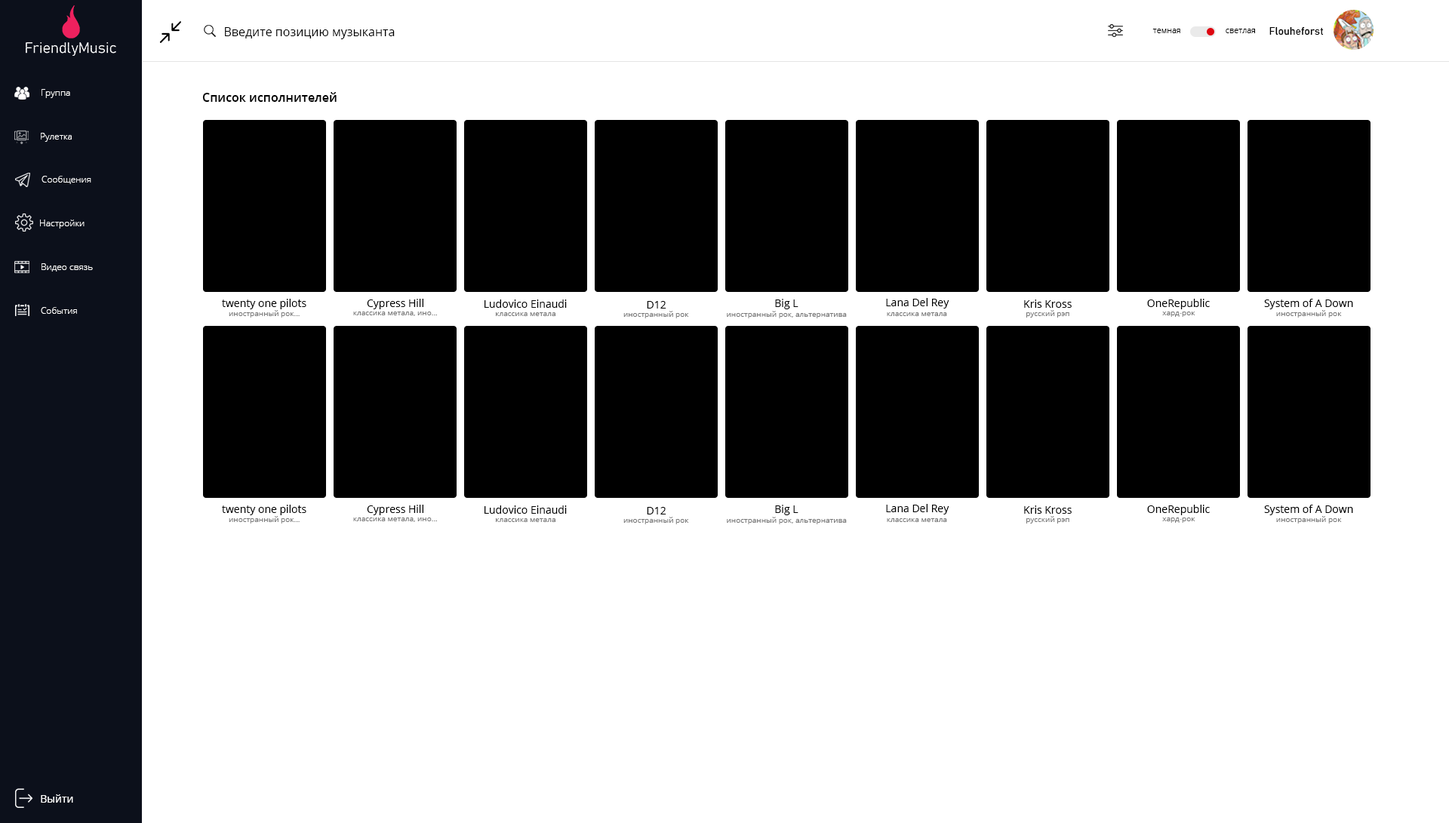
<style>
.page{position:relative;width:1449px;height:823px;background:#ffffff}
.page>*{position:absolute;margin:0}
.t1{font:12.1px "OpenSans";color:#000000}
.t2{font:8.3px "OpenSans-Light";color:#000000}
.t3{font:10.6px "Bahnschrift";color:#000000}
.t4{font:9.1px "OpenSans-Light";color:#ffffff}
.t5{font:12.1px "OpenSans-Semibold";color:#000000}
.t6{font:10.6px "OpenSans";color:#000000}
.t7{font:7.5px "OpenSans";color:#777777}
.t8{font:10.6px "OpenSans";color:#ffffff}
</style>
<div class="page">
<p class="t1" style="left:225px;top:27px;width:170px;height:12px">Введите позицию музыканта</p>
<p class="t2" style="left:1152px;top:29px;width:28px;height:4px">темная</p>
<p class="t2" style="left:1225px;top:29px;width:30px;height:4px">светлая</p>
<p class="t3" style="left:1269px;top:26px;width:54px;height:9px">Flouheforst</p>
<p class="t4" style="left:41px;top:89px;width:29px;height:9px">Группа</p>
<p class="t5" style="left:202px;top:92px;width:135px;height:10px">Список исполнителей</p>
<p class="t4" style="left:41px;top:133px;width:31px;height:9px">Рулетка</p>
<p class="t4" style="left:41px;top:176px;width:50px;height:8px">Сообщения</p>
<p class="t4" style="left:40px;top:220px;width:45px;height:9px">Настройки</p>
<p class="t4" style="left:41px;top:263px;width:52px;height:9px">Видео связь</p>
<p class="t6" style="left:222px;top:299px;width:84px;height:10px">twenty one pilots</p>
<p class="t6" style="left:367px;top:299px;width:56px;height:10px">Cypress Hill</p>
<p class="t6" style="left:484px;top:300px;width:83px;height:8px">Ludovico Einaudi</p>
<p class="t6" style="left:647px;top:301px;width:19px;height:8px">D12</p>
<p class="t6" style="left:775px;top:299px;width:23px;height:10px">Big L</p>
<p class="t6" style="left:886px;top:298px;width:63px;height:11px">Lana Del Rey</p>
<p class="t6" style="left:1024px;top:300px;width:47px;height:8px">Kris Kross</p>
<p class="t6" style="left:1147px;top:299px;width:62px;height:10px">OneRepublic</p>
<p class="t6" style="left:1264px;top:299px;width:89px;height:10px">System of A Down</p>
<p class="t4" style="left:41px;top:307px;width:36px;height:7px">События</p>
<p class="t7" style="left:229px;top:310px;width:71px;height:8px">иностранный рок...</p>
<p class="t7" style="left:353px;top:312px;width:84px;height:4px">классика метала, ино...</p>
<p class="t7" style="left:496px;top:312px;width:59px;height:4px">классика метала</p>
<p class="t7" style="left:623px;top:311px;width:66px;height:7px">иностранный рок</p>
<p class="t7" style="left:727px;top:311px;width:120px;height:7px">иностранный рок, альтернатива</p>
<p class="t7" style="left:887px;top:312px;width:60px;height:4px">классика метала</p>
<p class="t7" style="left:1026px;top:310px;width:43px;height:8px">русский рэп</p>
<p class="t7" style="left:1162px;top:312px;width:33px;height:5px">хард-рок</p>
<p class="t7" style="left:1276px;top:310px;width:65px;height:8px">иностранный рок</p>
<p class="t6" style="left:222px;top:505px;width:84px;height:10px">twenty one pilots</p>
<p class="t6" style="left:367px;top:505px;width:56px;height:10px">Cypress Hill</p>
<p class="t6" style="left:484px;top:506px;width:83px;height:8px">Ludovico Einaudi</p>
<p class="t6" style="left:647px;top:507px;width:19px;height:8px">D12</p>
<p class="t6" style="left:775px;top:505px;width:23px;height:10px">Big L</p>
<p class="t6" style="left:886px;top:504px;width:63px;height:11px">Lana Del Rey</p>
<p class="t6" style="left:1024px;top:506px;width:47px;height:8px">Kris Kross</p>
<p class="t6" style="left:1147px;top:505px;width:62px;height:10px">OneRepublic</p>
<p class="t6" style="left:1264px;top:505px;width:89px;height:10px">System of A Down</p>
<p class="t7" style="left:229px;top:516px;width:71px;height:8px">иностранный рок...</p>
<p class="t7" style="left:353px;top:518px;width:84px;height:4px">классика метала, ино...</p>
<p class="t7" style="left:496px;top:518px;width:59px;height:4px">классика метала</p>
<p class="t7" style="left:623px;top:517px;width:66px;height:7px">иностранный рок</p>
<p class="t7" style="left:727px;top:517px;width:120px;height:7px">иностранный рок, альтернатива</p>
<p class="t7" style="left:887px;top:518px;width:60px;height:4px">классика метала</p>
<p class="t7" style="left:1026px;top:516px;width:43px;height:8px">русский рэп</p>
<p class="t7" style="left:1162px;top:518px;width:33px;height:5px">хард-рок</p>
<p class="t7" style="left:1276px;top:516px;width:65px;height:8px">иностранный рок</p>
<p class="t8" style="left:41px;top:794px;width:32px;height:9px">Выйти</p>
</div>
